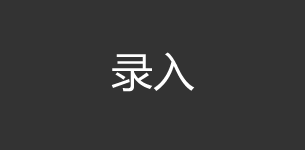
<style>
.page{position:relative;width:305px;height:150px;background:#333333}
.page>*{position:absolute;margin:0}
.t1{font:41.7px "MicrosoftYaHei";color:#ffffff}
</style>
<div class="page">
<p class="t1" style="left:111px;top:52px;width:84px;height:40px">录入</p>
</div>
